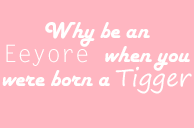
<style>
.page{position:relative;width:194px;height:128px;background:#ffb6c1}
.page>*{position:absolute;margin:0}
.t1{font:24px/24px "HarlowSolid";color:#ffffff}
.t2{font:24px/24px "LetterGothicStd";color:#ffffff}
.t3{font:24px/24px "SegoePrint";color:#ffffff}
</style>
<div class="page">
<p class="t1" style="left:2px;top:22px;width:190px;height:72px;text-align:center">Why be an <span class="t2">Eeyore </span>when you were born a <span class="t3">Tigger</span></p>
</div>
